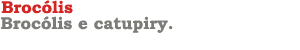
<style>
.page{position:relative;width:300px;height:50px;background:#ffffff}
.page>*{position:absolute;margin:0}
.t1{font:17px "BookmanOldStyle-Bold";color:#d42525}
.t2{font:17px "BookmanOldStyle-Bold";color:#7c7c79}
</style>
<div class="page">
<p class="t1" style="left:1px;top:0px;width:72px;height:14px">Brocólis</p>
<p class="t2" style="left:1px;top:16px;width:172px;height:17px">Brocólis e catupiry.</p>
</div>
